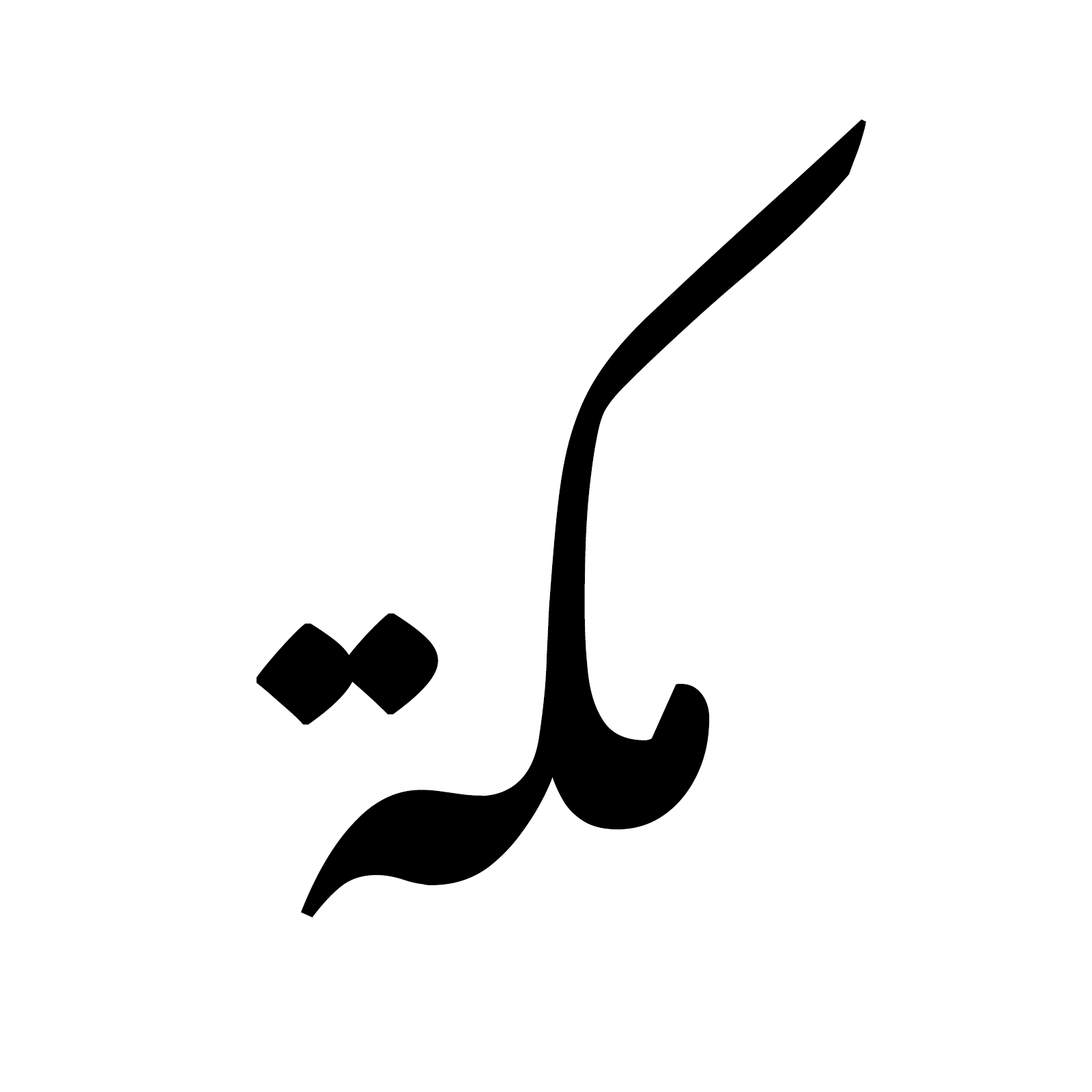
<style>
.page{position:relative;width:1092px;height:1092px;background:#ffffff}
.page>*{position:absolute;margin:0}
.t1{font:563.8px "NotoNastaliqUrdu-Regular";color:#000000}
</style>
<div class="page">
<p class="t1" style="left:256px;top:119px;width:610px;height:799px">مكة</p>
</div>
